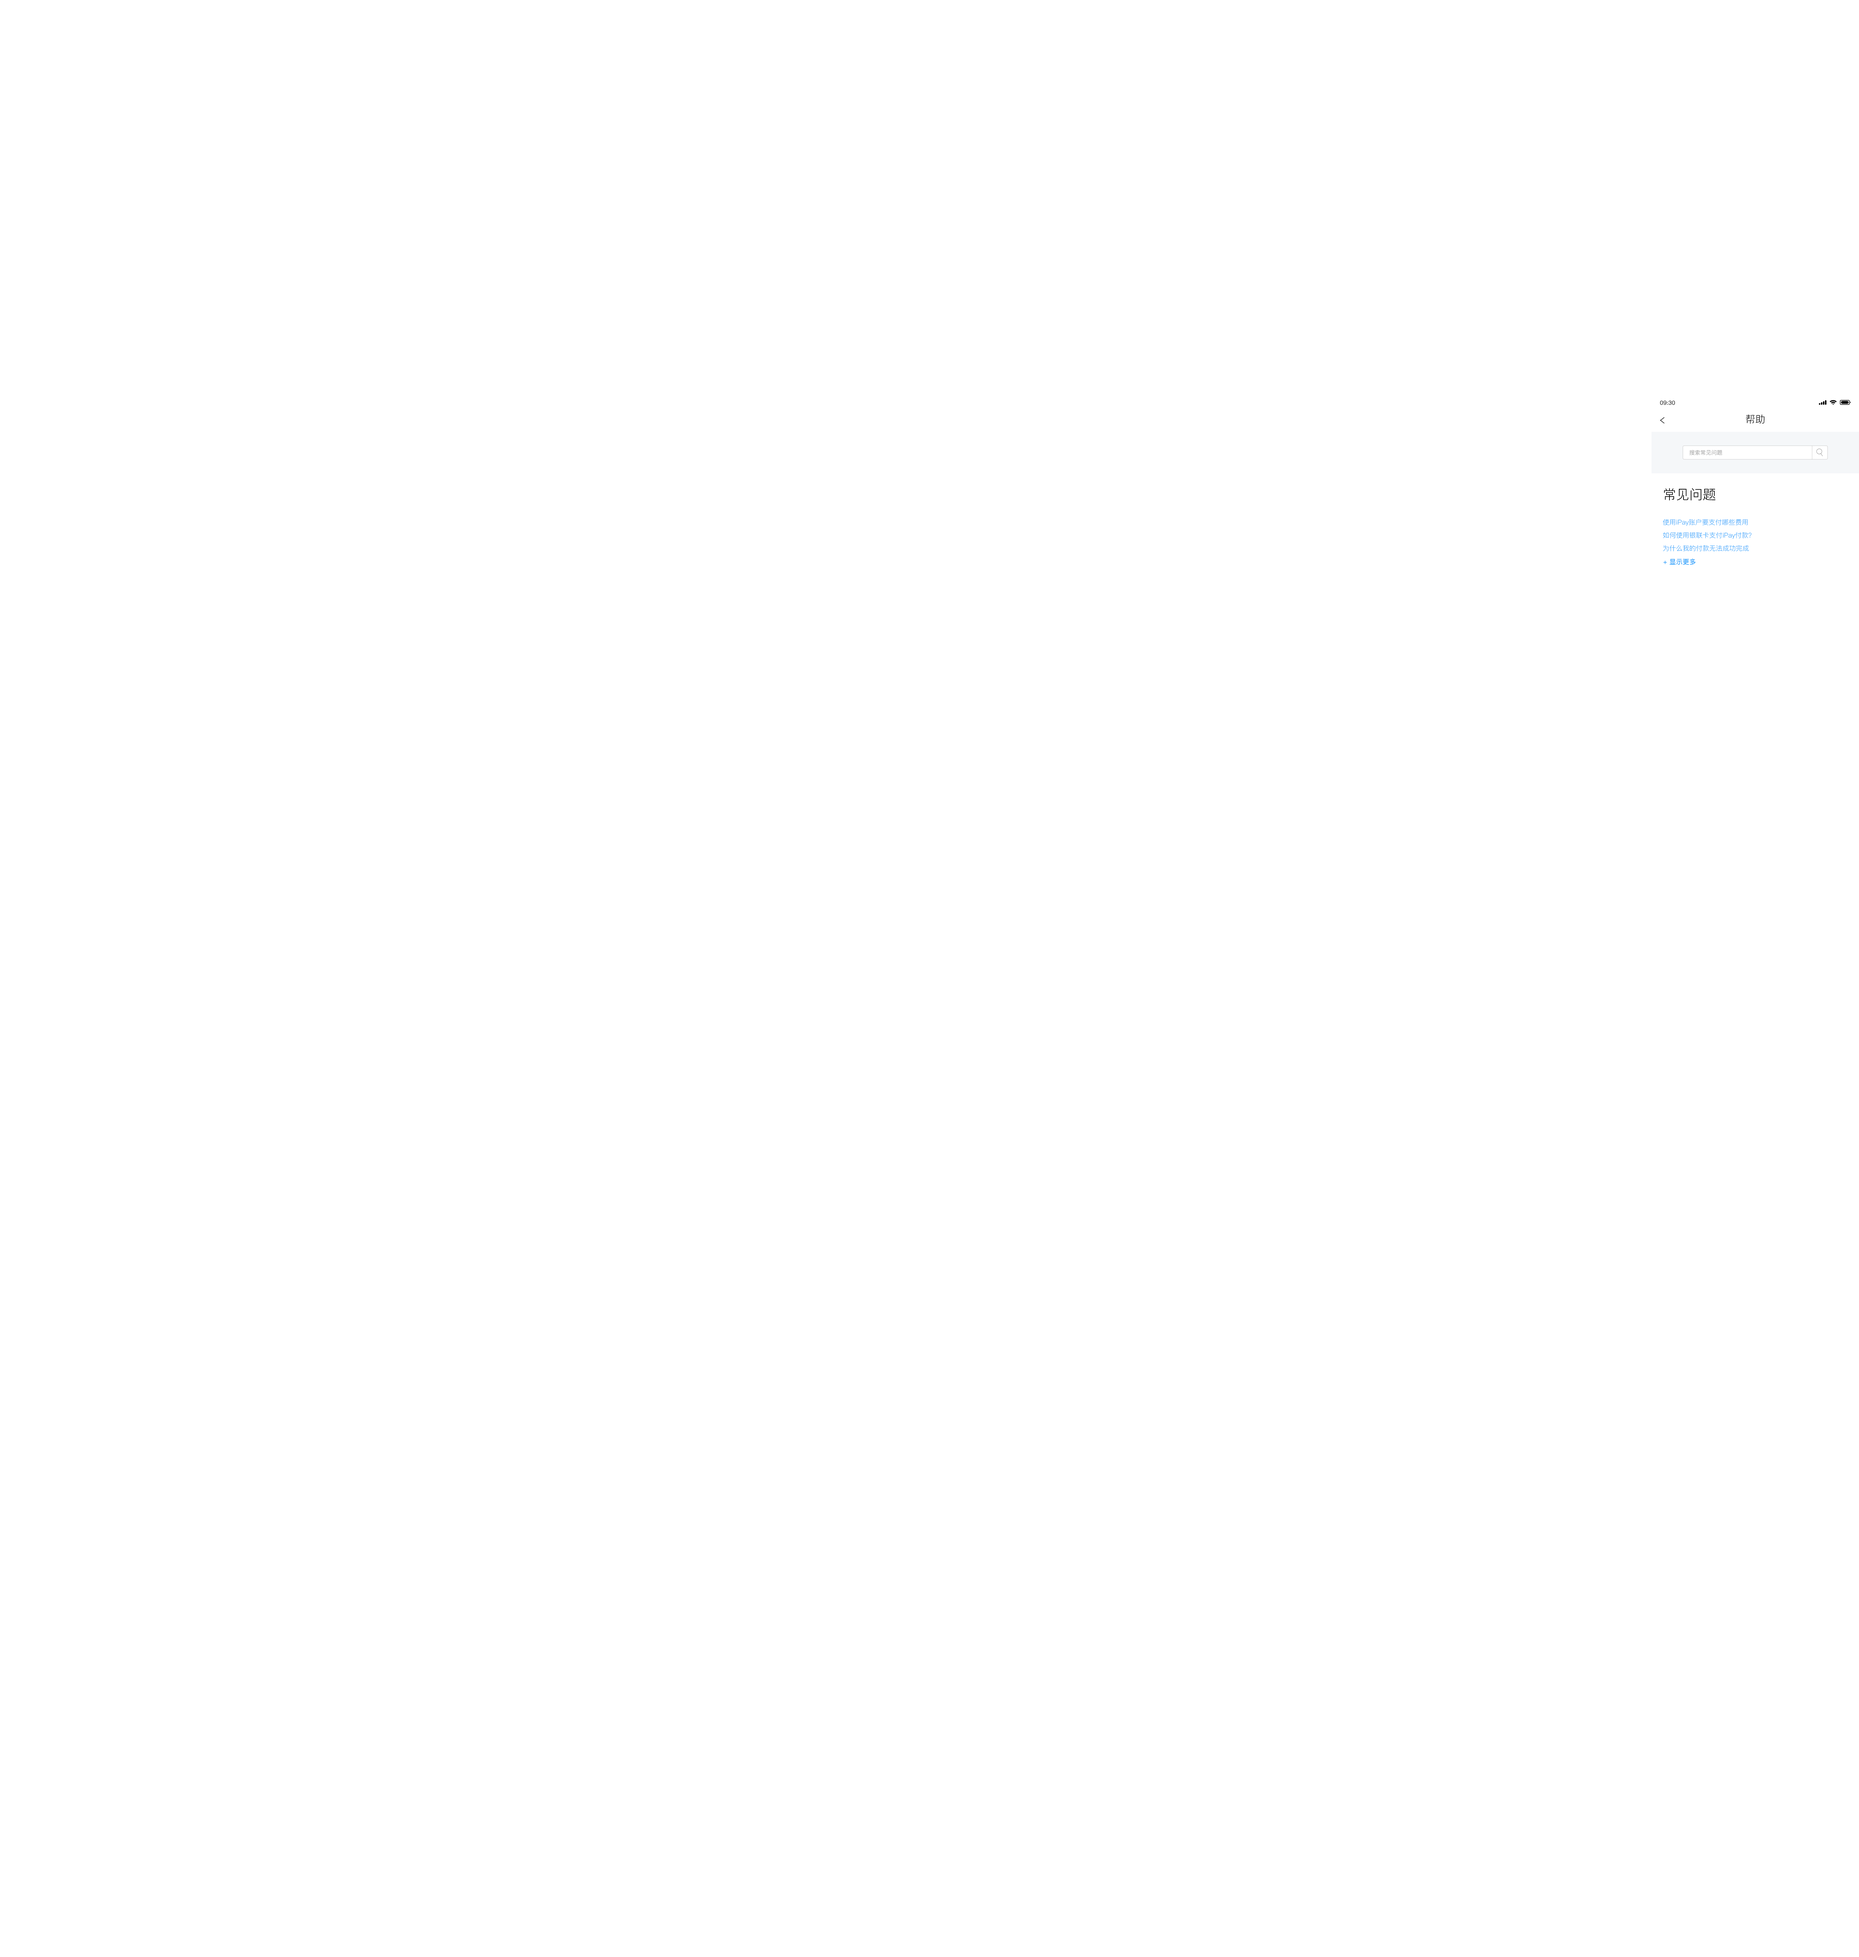
<style>
.page{position:relative;width:1859px;height:1957px;background:#ffffff}
.page>*{position:absolute;margin:0}
.t1{font:5.5px "PingFang-SC-Regular";color:#000000;font-weight:bold}
.t2{font:10px "PingFang-SC-Regular";color:#000000}
.t3{font:5.5px "PingFang-SC-Regular";color:#979797}
.t4{font:13.3px "PingFang-SC-Regular";color:#000000}
.t5{font:6.6px "PingFang-SC-Regular";color:#2ca1fb}
.t6{font:6.6px "PingFang-SC-Bold";color:#2ca1fb}
</style>
<div class="page">
<p class="t1" style="left:1660px;top:400px;width:15px;height:5px">09:30</p>
<p class="t2" style="left:1746px;top:414px;width:19px;height:10px">帮助</p>
<p class="t3" style="left:1690px;top:450px;width:33px;height:5px">搜索常见问题</p>
<p class="t4" style="left:1664px;top:488px;width:52px;height:12px">常见问题</p>
<p class="t5" style="left:1663px;top:519px;width:85px;height:7px">使用iPay账户要支付哪些费用</p>
<p class="t5" style="left:1663px;top:532px;width:89px;height:7px">如何使用银联卡支付iPay付款？</p>
<p class="t5" style="left:1663px;top:545px;width:86px;height:6px">为什么我的付款无法成功完成</p>
<p class="t6" style="left:1664px;top:558px;width:32px;height:7px">+ 显示更多</p>
</div>
